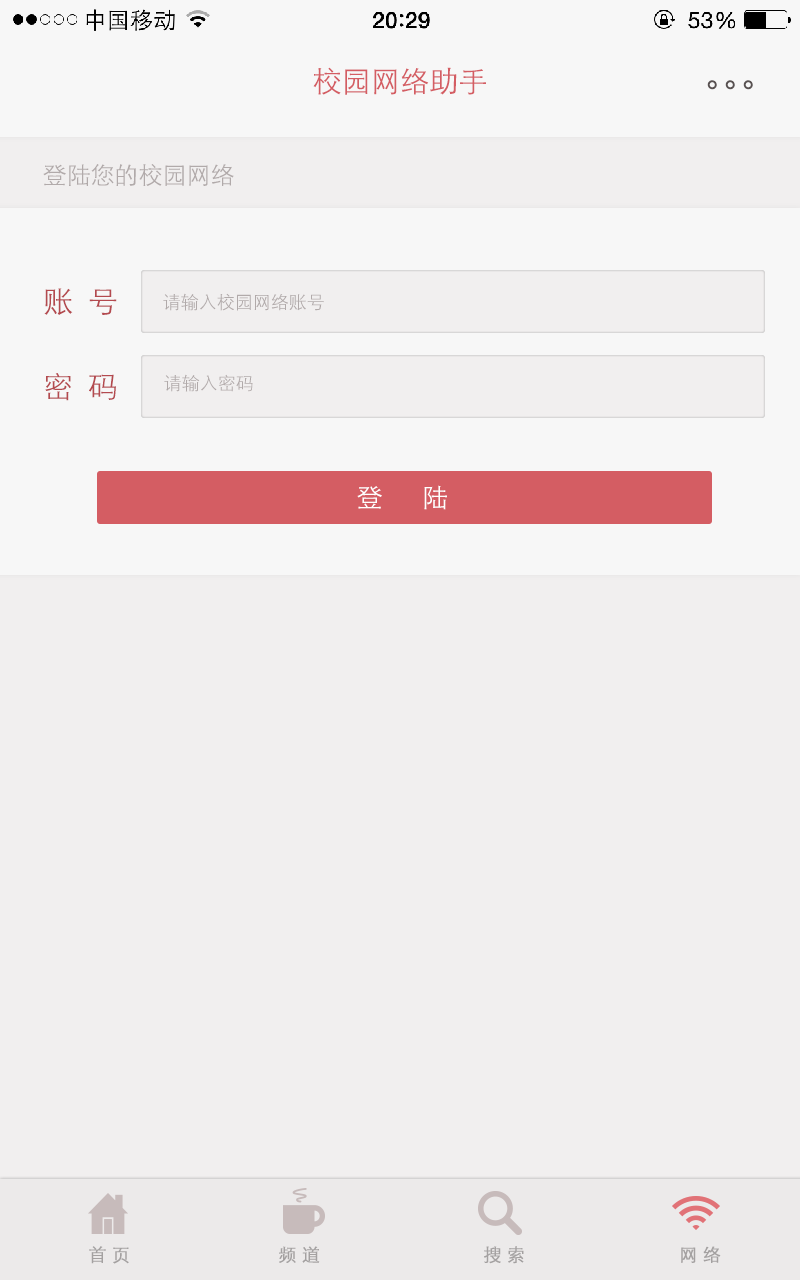
<style>
.page{position:relative;width:800px;height:1280px;background:#f1efef}
.page>*{position:absolute;margin:0}
.t1{font:29.2px "STXihei";color:#d45d63}
.t2{font:36px "STXihei";letter-spacing:-0.5em;color:#585151}
.t3{font:24px "STXihei";color:#b1aaaa}
.t4{font:29.9px "STXihei";color:#b44a4f}
.t5{font:18px "STXihei";color:#b1aaaa}
.t6{font:26.2px "STXihei";color:#ffffff}
.t7{font:18px "STXihei";color:#8f8c8c;font-weight:bold}
</style>
<div class="page">
<p class="t1" style="left:313px;top:67px;width:173px;height:28px">校园网络助手</p>
<p class="t2" style="left:707px;top:80px;width:46px;height:10px">。。。</p>
<p class="t3" style="left:43px;top:164px;width:191px;height:22px">登陆您的校园网络</p>
<p class="t4" style="left:44px;top:288px;width:73px;height:27px">账  号</p>
<p class="t5" style="left:163px;top:293px;width:161px;height:18px">请输入校园网络账号</p>
<p class="t4" style="left:45px;top:373px;width:71px;height:28px">密  码</p>
<p class="t5" style="left:164px;top:374px;width:89px;height:18px">请输入密码</p>
<p class="t6" style="left:357px;top:485px;width:90px;height:25px">登      陆</p>
<p class="t7" style="left:89px;top:1246px;width:632px;height:18px;opacity:0.8">首 页             频 道            搜 索        网 络</p>
</div>
